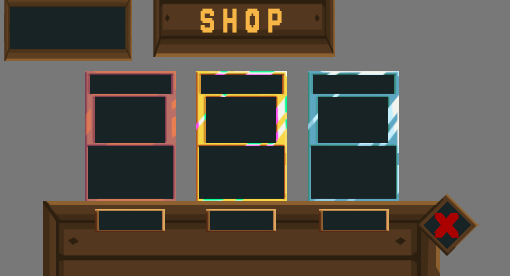
<style>
.page{position:relative;width:510px;height:276px;background:#787878}
.page>*{position:absolute;margin:0}
.t1{font:43.9px "Jersey10-Regular";letter-spacing:0.003em;color:#f7b645;scale:0.79 1}
</style>
<div class="page">
<p class="t1" style="left:200px;top:8px;width:82px;height:25px">S H O P</p>
</div>
